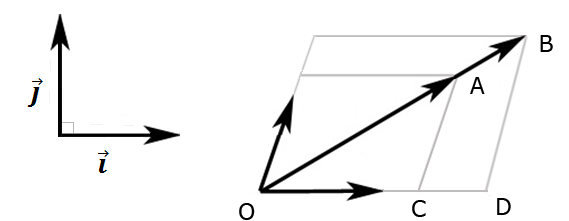
<style>
.page{position:relative;width:569px;height:221px;background:#ffffff}
.page>*{position:absolute;margin:0}
.t1{font:22.7px "Verdana";color:#010001}
</style>
<div class="page">
<p class="t1" style="left:540px;top:35px;width:13px;height:17px">B</p>
<p class="t1" style="left:470px;top:77px;width:15px;height:17px">A</p>
<p class="t1" style="left:497px;top:198px;width:14px;height:17px">D</p>
<p class="t1" style="left:239px;top:203px;width:16px;height:17px">O</p>
<p class="t1" style="left:412px;top:200px;width:14px;height:17px">C</p>
</div>
